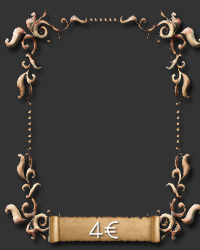
<style>
.page{position:relative;width:200px;height:250px;background:#333333}
.page>*{position:absolute;margin:0}
.t1{font:25px "Kiona-Regular";color:#ffffff}
</style>
<div class="page">
<p class="t1" style="left:88px;top:221px;width:30px;height:18px">4€</p>
</div>
